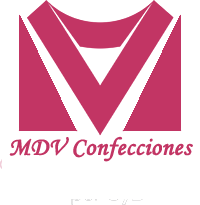
<style>
.page{position:relative;width:200px;height:205px;background:#ffffff}
.page>*{position:absolute;margin:0}
.t1{font:25px "MonotypeCorsiva";color:#c23564;font-weight:bold}
</style>
<div class="page">
<p class="t1" style="left:9px;top:136px;width:184px;height:26px">MDV Confecciones</p>
</div>
